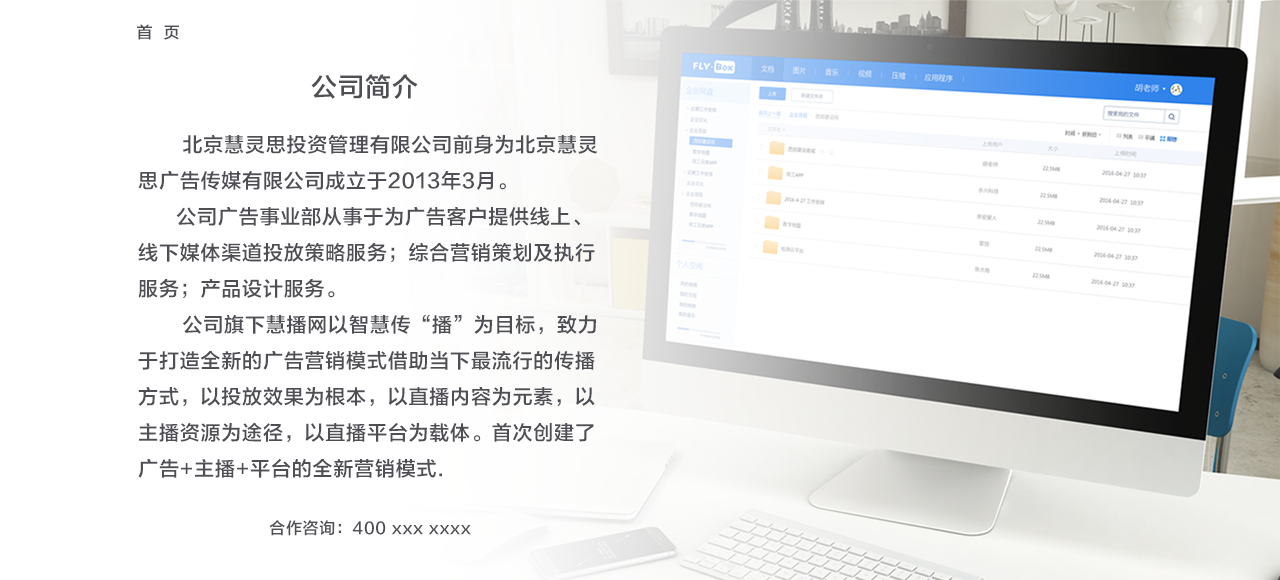
<style>
.page{position:relative;width:1280px;height:580px;background:#ffffff}
.page>*{position:absolute;margin:0}
.t1{font:16px "FZLTZHK--GBK1-0";letter-spacing:0.04em;color:#4f4e54}
.t2{font:26px "FZLTZHK--GBK1-0";letter-spacing:0.04em;color:#4f4e54}
.t3{font:20px/36px "FZLTZHK--GBK1-0";letter-spacing:0.04em;color:#4f4e54}
</style>
<div class="page">
<p class="t1" style="left:137px;top:24px;width:42px;height:16px">首  页</p>
<p class="t2" style="left:311px;top:74px;width:107px;height:25px">公司简介</p>
<p class="t3" style="left:138px;top:135px;width:459px;height:343px">北京慧灵思投资管理有限公司前身为北京慧灵<br>思广告传媒有限公司成立于2013年3月。<br>      公司广告事业部从事于为广告客户提供线上、<br>线下媒体渠道投放策略服务；综合营销策划及执行<br>服务；产品设计服务。<br>       公司旗下慧播网以智慧传“播”为目标，致力<br>于打造全新的广告营销模式借助当下最流行的传播<br>方式，以投放效果为根本，以直播内容为元素，以<br>主播资源为途径，以直播平台为载体。首次创建了<br>广告+主播+平台的全新营销模式.</p>
<p class="t1" style="left:269px;top:520px;width:202px;height:16px">合作咨询：400 xxx xxxx</p>
</div>
